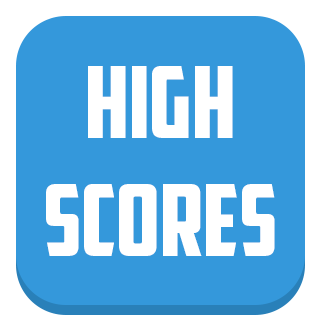
<style>
.page{position:relative;width:320px;height:320px;background:#3498db}
.page>*{position:absolute;margin:0}
.t1{font:100px "AmericanCaptain";color:#ffffff}
</style>
<div class="page">
<p class="t1" style="left:88px;top:66px;width:145px;height:72px">HIGH</p>
<p class="t1" style="left:46px;top:184px;width:229px;height:72px">SCORES</p>
</div>
